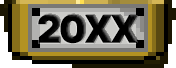
<style>
.page{position:relative;width:176px;height:68px}
.page>*{position:absolute;margin:0}
.t1{font:38px "InterTight-Black";letter-spacing:-0.05em;color:#000000}
</style>
<div class="page">
<p class="t1" style="left:38px;top:14px;width:100px;height:30px">20XX</p>
</div>
